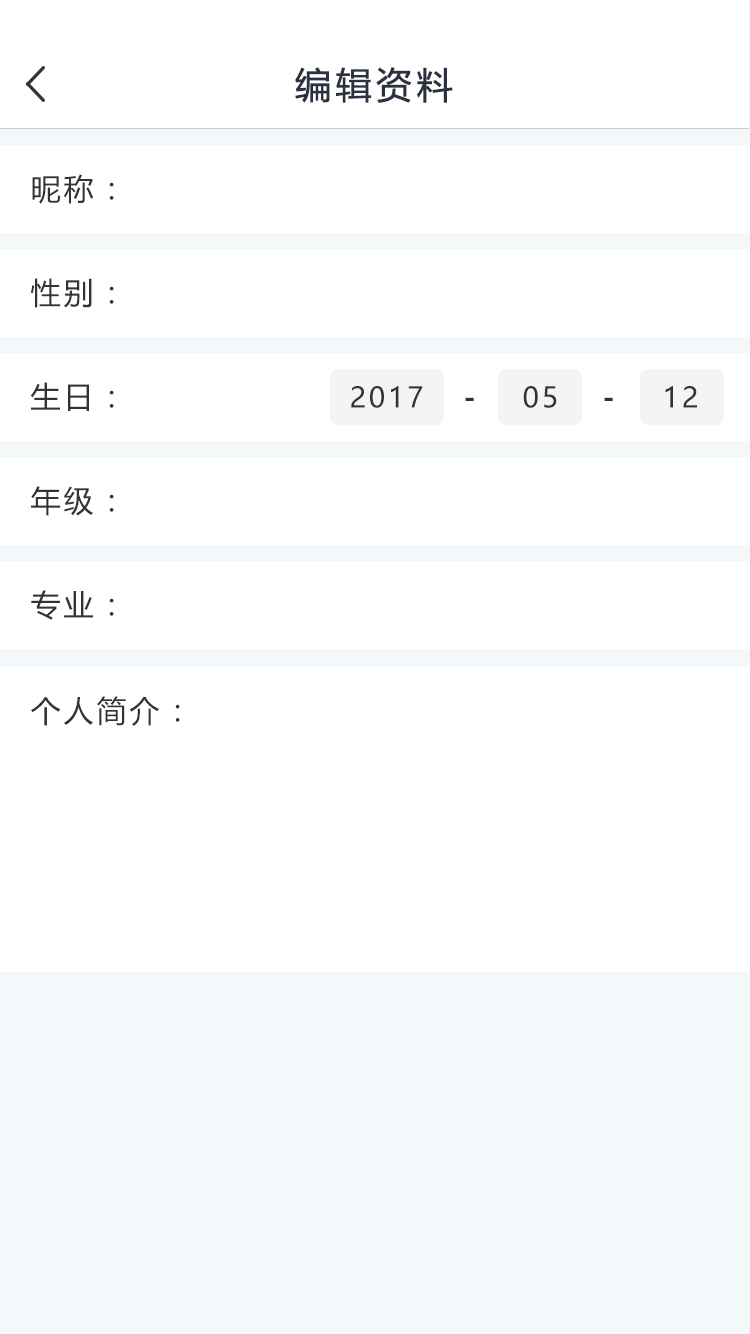
<style>
.page{position:relative;width:750px;height:1334px;background:#ffffff}
.page>*{position:absolute;margin:0}
.t1{font:36px "MicrosoftYaHei";letter-spacing:0.1em;color:#2b313f;font-weight:bold}
.t2{font:30px "MicrosoftYaHei";letter-spacing:0.1em;color:#333333}
.t3{font:28px "MicrosoftYaHei";letter-spacing:0.1em;color:#333333}
.t4{font:28px "MicrosoftYaHei-Bold";letter-spacing:0.1em;color:#333333}
</style>
<div class="page">
<p class="t1" style="left:295px;top:67px;width:158px;height:36px">编辑资料</p>
<p class="t2" style="left:32px;top:174px;width:82px;height:30px">昵称：</p>
<p class="t2" style="left:30px;top:278px;width:84px;height:30px">性别：</p>
<p class="t2" style="left:30px;top:382px;width:84px;height:29px">生日：</p>
<p class="t3" style="left:351px;top:386px;width:72px;height:22px">2017</p>
<p class="t3" style="left:523px;top:386px;width:34px;height:22px">05</p>
<p class="t3" style="left:665px;top:386px;width:32px;height:22px">12</p>
<p class="t4" style="left:465px;top:397px;width:9px;height:4px">-</p>
<p class="t4" style="left:604px;top:397px;width:9px;height:4px">-</p>
<p class="t2" style="left:31px;top:486px;width:83px;height:30px">年级：</p>
<p class="t2" style="left:31px;top:590px;width:83px;height:30px">专业：</p>
<p class="t2" style="left:31px;top:696px;width:149px;height:30px">个人简介：</p>
</div>
